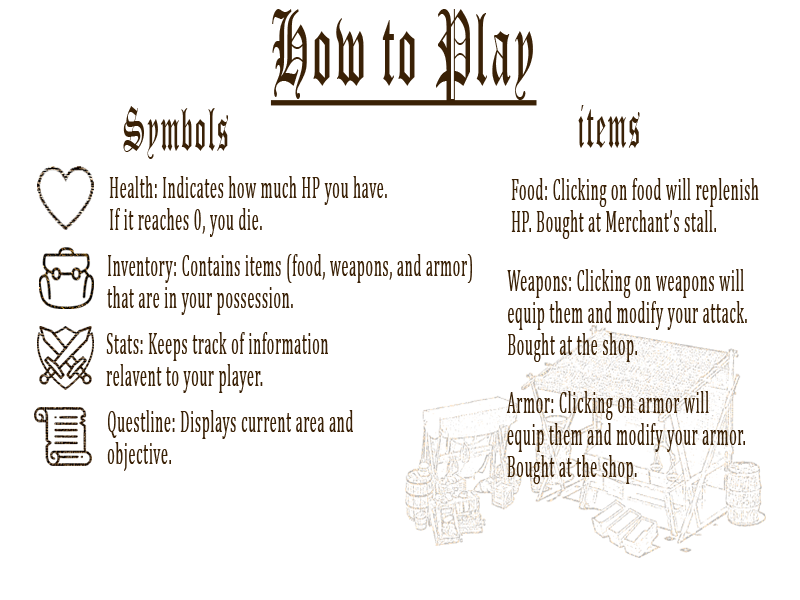
<style>
.page{position:relative;width:800px;height:600px;background:#ffffff}
.page>*{position:absolute;margin:0}
.t1{font:104.2px "OldEnglishTextMT";letter-spacing:0.06em;color:#3a2106;text-decoration:underline;scale:0.43 1}
.t2{font:60.8px "OldEnglishTextMT";letter-spacing:0.06em;color:#3a2106;scale:0.43 1}
.t3{font:32.4px/32.1px "Cambria";letter-spacing:0.06em;color:#3a2106;scale:0.43 1}
</style>
<div class="page">
<p class="t1" style="left:270px;top:9px;width:267px;height:97px">How to Play</p>
<p class="t2" style="left:123px;top:106px;width:105px;height:53px">Symbols</p>
<p class="t2" style="left:578px;top:105px;width:62px;height:43px">items</p>
<p class="t3" style="left:109px;top:176px;width:278px;height:61px">Health: Indicates how much HP you have. <br>If it reaches 0, you die.</p>
<p class="t3" style="left:511px;top:178px;width:248px;height:61px">Food: Clicking on food will replenish<br>HP. Bought at Merchant’s stall.</p>
<p class="t3" style="left:107px;top:254px;width:365px;height:61px">Inventory: Contains items (food, weapons, and armor)<br>that are in your possession.</p>
<p class="t3" style="left:507px;top:269px;width:240px;height:93px">Weapons: Clicking on weapons will<br>equip them and modify your attack. <br>Bought at the shop.</p>
<p class="t3" style="left:106px;top:332px;width:222px;height:61px">Stats: Keeps track of information<br>relavent to your player.</p>
<p class="t3" style="left:506px;top:391px;width:239px;height:93px">Armor: Clicking on armor will <br>equip them and modify your armor.<br>Bought at the shop.</p>
<p class="t3" style="left:107px;top:410px;width:246px;height:61px">Questline: Displays current area and<br>objective.</p>
</div>
